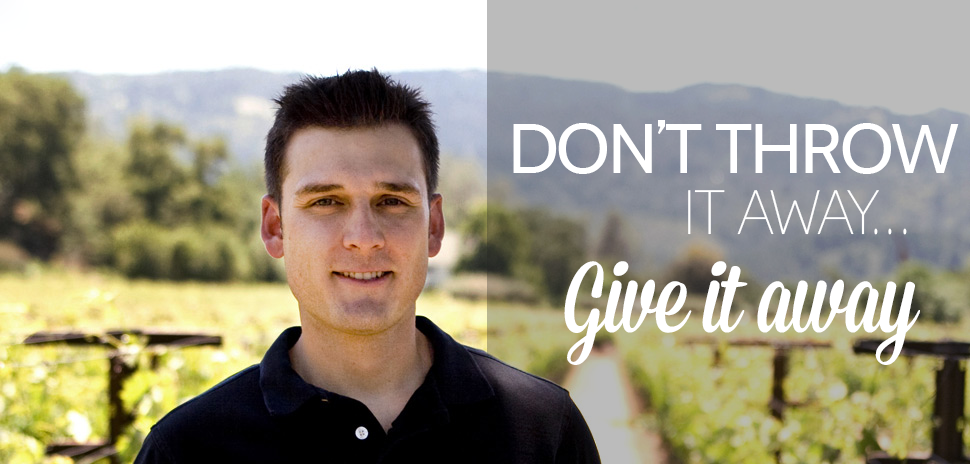
<style>
.page{position:relative;width:970px;height:464px}
.page>*{position:absolute;margin:0}
.t1{font:69.6px "Cabin-Regular";letter-spacing:-0.025em;color:#ffffff}
.t2{font:61px "Lane-Narrow";letter-spacing:-0.025em;color:#ffffff}
.t3{font:100px "Mission-Script";letter-spacing:-0.025em;color:#ffffff}
</style>
<div class="page">
<p class="t1" style="left:513px;top:120px;width:446px;height:54px">DON’T THROW</p>
<p class="t2" style="left:688px;top:190px;width:219px;height:45px">IT AWAY...</p>
<p class="t3" style="left:564px;top:261px;width:356px;height:104px">Give it away</p>
</div>
